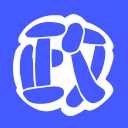
<style>
.page{position:relative;width:128px;height:128px;background:#4459ff}
.page>*{position:absolute;margin:0}
.t1{font:117px "MINIJbaiqi";color:#ffffff}
</style>
<div class="page">
<p class="t1" style="left:13px;top:14px;width:101px;height:102px">政</p>
</div>
